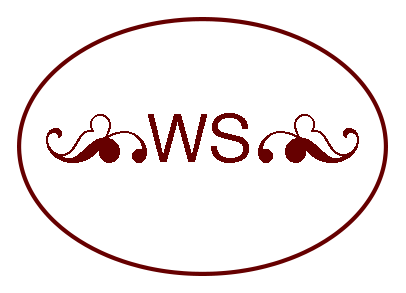
<style>
.page{position:relative;width:406px;height:293px;background:#ffffff}
.page>*{position:absolute;margin:0}
.t1{font:66.7px "Helvetica";color:#660000}
.t2{font:66.7px "HoeflerText-Ornaments";color:#660000}
</style>
<div class="page">
<p class="t1" style="left:148px;top:113px;width:211px;height:50px">WS<span class="t2">S</span></p>
</div>
